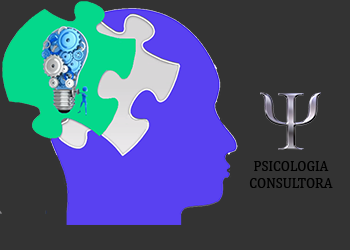
<style>
.page{position:relative;width:350px;height:250px;background:#333333}
.page>*{position:absolute;margin:0}
.t1{font:14px "Cambria";color:#000000}
</style>
<div class="page">
<p class="t1" style="left:249px;top:161px;width:84px;height:27px;text-align:center">PSICOLOGIA<br>CONSULTORA</p>
</div>
